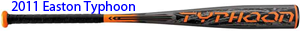
<style>
.page{position:relative;width:300px;height:31px;background:#ffffff}
.page>*{position:absolute;margin:0}
.t1{font:14px "MyriadPro-Regular";color:#0000ff}
</style>
<div class="page">
<p class="t1" style="left:11px;top:1px;width:124px;height:13px">2011 Easton Typhoon</p>
</div>
